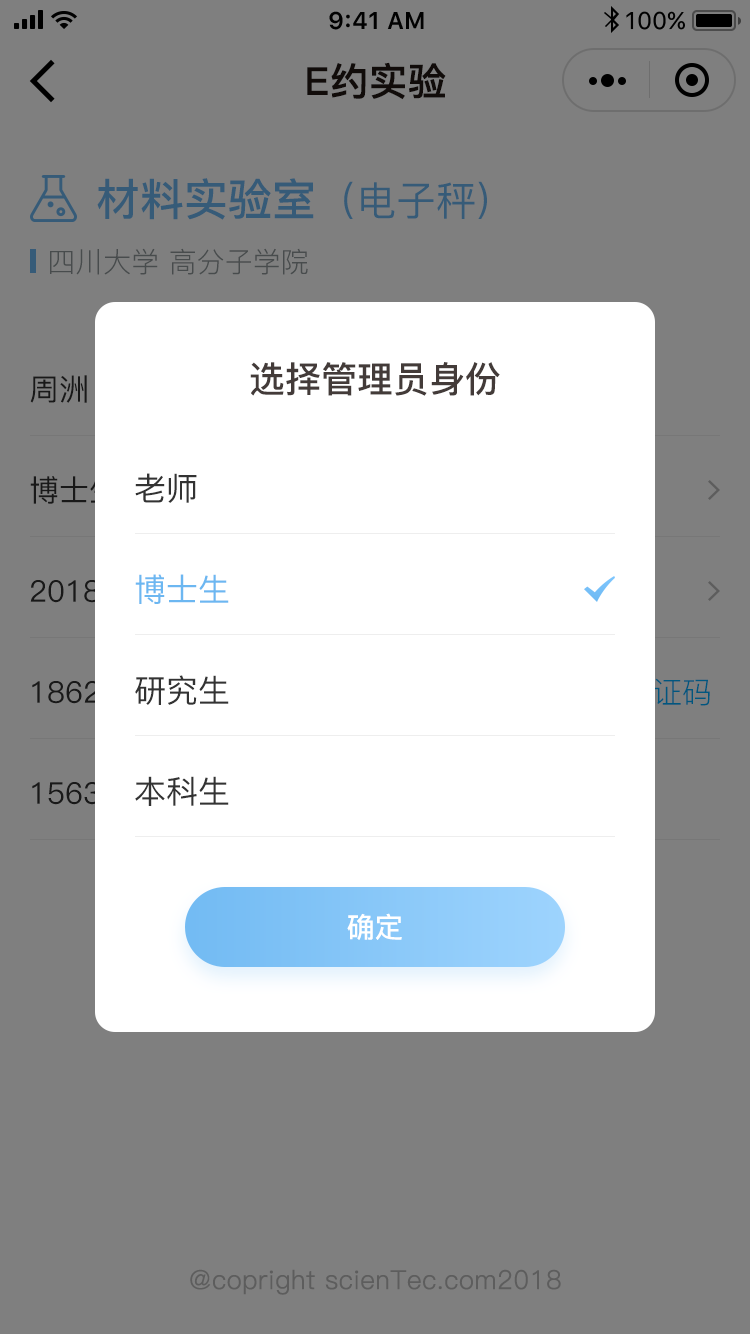
<style>
.page{position:relative;width:750px;height:1334px;background:#7f7f7f}
.page>*{position:absolute;margin:0}
.t1{font:38px "PingFang-SC-Bold";color:#231815;font-weight:bold}
.t2{font:44px "PingFang-SC-Bold";color:#365b78}
.t3{font:40px "PingFang-SC-Medium";color:#365b78}
.t4{font:28px "PingFang-SC-Regular";color:#484c4d}
.t5{font:36px "PingFang-SC-Bold";color:#433b39}
.t6{font:30px "PingFang-SC-Medium";color:#191919}
.t7{font:32px "PingFang-SC-Medium";color:#333333}
.t8{font:32px "PingFang-SC-Medium";color:#6cb7f1}
.t9{font:28.4px "PingFang-SC-Bold";color:#ffffff}
.t10{font:26px "PingFang-SC-Regular";color:#5d5d5d;font-weight:bold}
</style>
<div class="page">
<p class="t1" style="left:307px;top:62px;width:139px;height:38px">E约实验</p>
<p class="t2" style="left:97px;top:178px;width:390px;height:42px">材料实验室<span class="t3">（电子秤)</span></p>
<p class="t4" style="left:50px;top:248px;width:258px;height:27px">四川大学 高分子学院</p>
<p class="t5" style="left:250px;top:362px;width:250px;height:34px">选择管理员身份</p>
<p class="t6" style="left:30px;top:375px;width:57px;height:28px">周洲</p>
<p class="t7" style="left:135px;top:473px;width:62px;height:30px">老师</p>
<p class="t6" style="left:30px;top:476px;width:88px;height:28px">博士生</p>
<p class="t6" style="left:30px;top:580px;width:70px;height:23px">2018</p>
<p class="t8" style="left:135px;top:574px;width:94px;height:30px">博士生</p>
<p class="t7" style="left:135px;top:675px;width:94px;height:30px">研究生</p>
<p class="t7" style="left:135px;top:776px;width:94px;height:30px">本科生</p>
<p class="t9" style="left:347px;top:913px;width:55px;height:27px">确定</p>
<p class="t10" style="left:190px;top:1269px;width:371px;height:26px">@copright scienTec.com2018</p>
</div>
